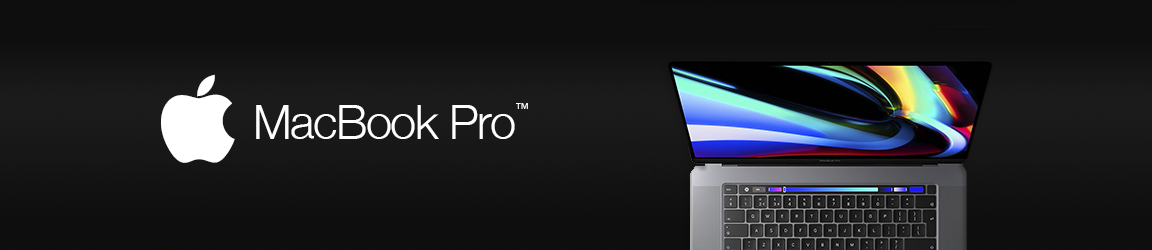
<style>
.page{position:relative;width:1152px;height:250px}
.page>*{position:absolute;margin:0}
.t1{font:46.5px "HelveticaNeue-Light";letter-spacing:-0.025em;color:#ffffff}
.t2{font:13.6px "HelveticaNeue-Light";letter-spacing:-0.025em;color:#ffffff}
</style>
<div class="page">
<p class="t1" style="left:256px;top:105px;width:259px;height:34px">MacBook Pro</p>
<p class="t2" style="left:516px;top:103px;width:12px;height:6px">™</p>
</div>
